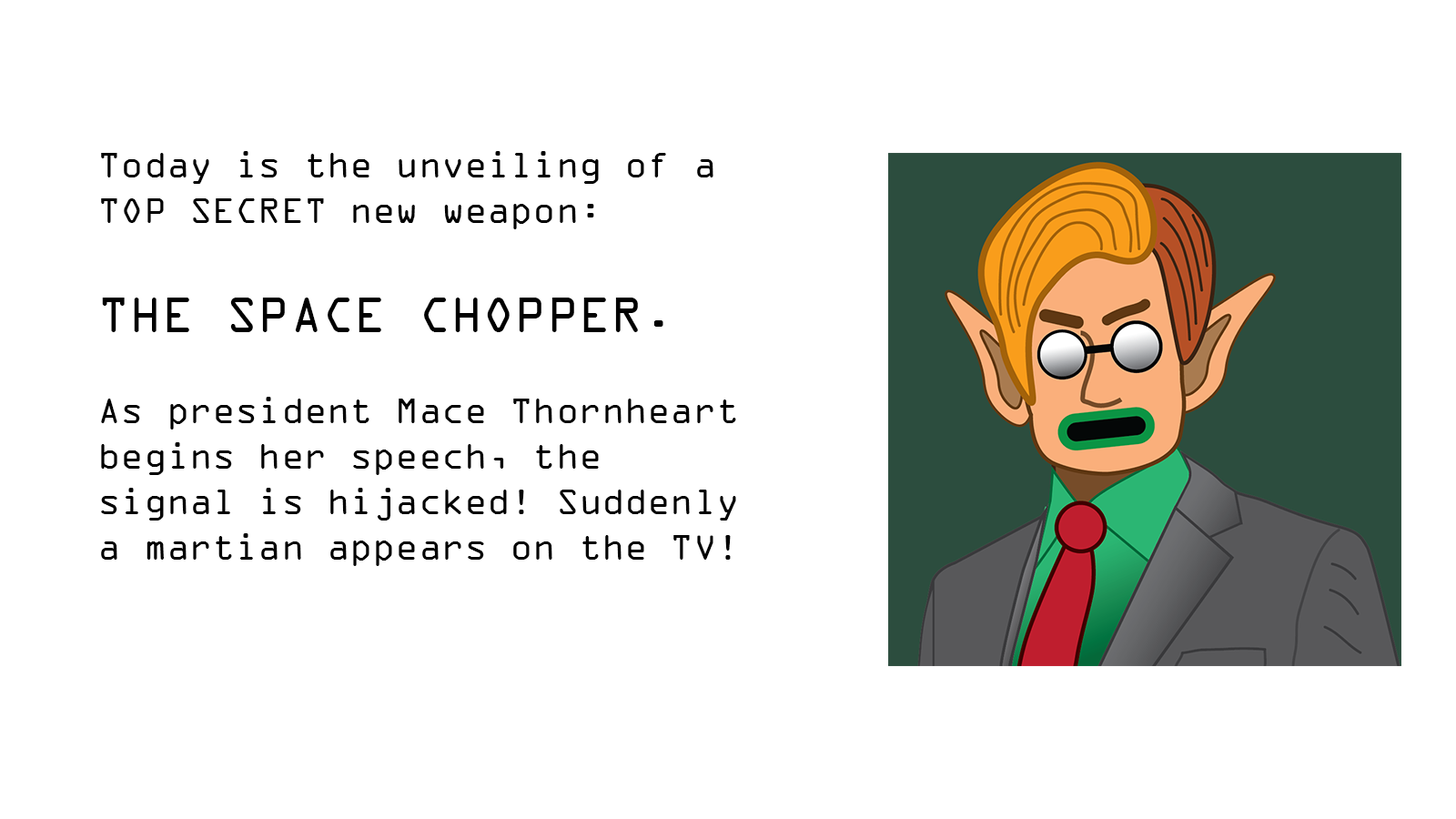
<style>
.page{position:relative;width:1456px;height:819px;background:#ffffff}
.page>*{position:absolute;margin:0}
.t1{font:37.9px "OCRAExtended";color:#000000}
.t2{font:53.1px "OCRAExtended";color:#000000}
</style>
<div class="page">
<p class="t1" style="left:101px;top:151px;width:635px;height:415px">Today is the unveiling of a TOP SECRET new weapon: <br><br><span class="t2">THE SPACE CHOPPER. <br></span><br>As president Mace Thornheart begins her speech, the signal is hijacked! Suddenly a martian appears on the TV!</p>
</div>
